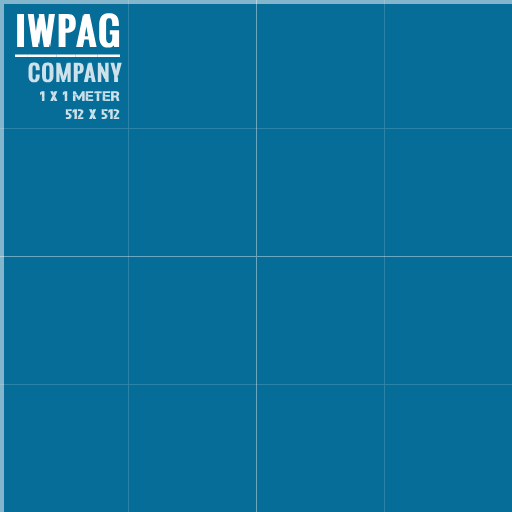
<style>
.page{position:relative;width:512px;height:512px;background:#066d98}
.page>*{position:absolute;margin:0}
.t1{font:38px "OswaldStencil-Bold";letter-spacing:0.025em;color:#ffffff;font-weight:bold;text-decoration:underline}
.t2{font:22px "OswaldStencil-Bold";letter-spacing:0.025em;color:#cde2ea;font-weight:bold}
.t3{font:14px/18px "Captureit";letter-spacing:0.025em;color:#cde2ea;font-weight:bold}
</style>
<div class="page">
<p class="t1" style="left:15px;top:13px;width:105px;height:44px">IWPAG</p>
<p class="t2" style="left:28px;top:62px;width:94px;height:21px">COMPANY</p>
<p class="t3" style="left:40px;top:91px;width:80px;height:29px;text-align:right">1 x 1 METER<br>512 x 512</p>
</div>
